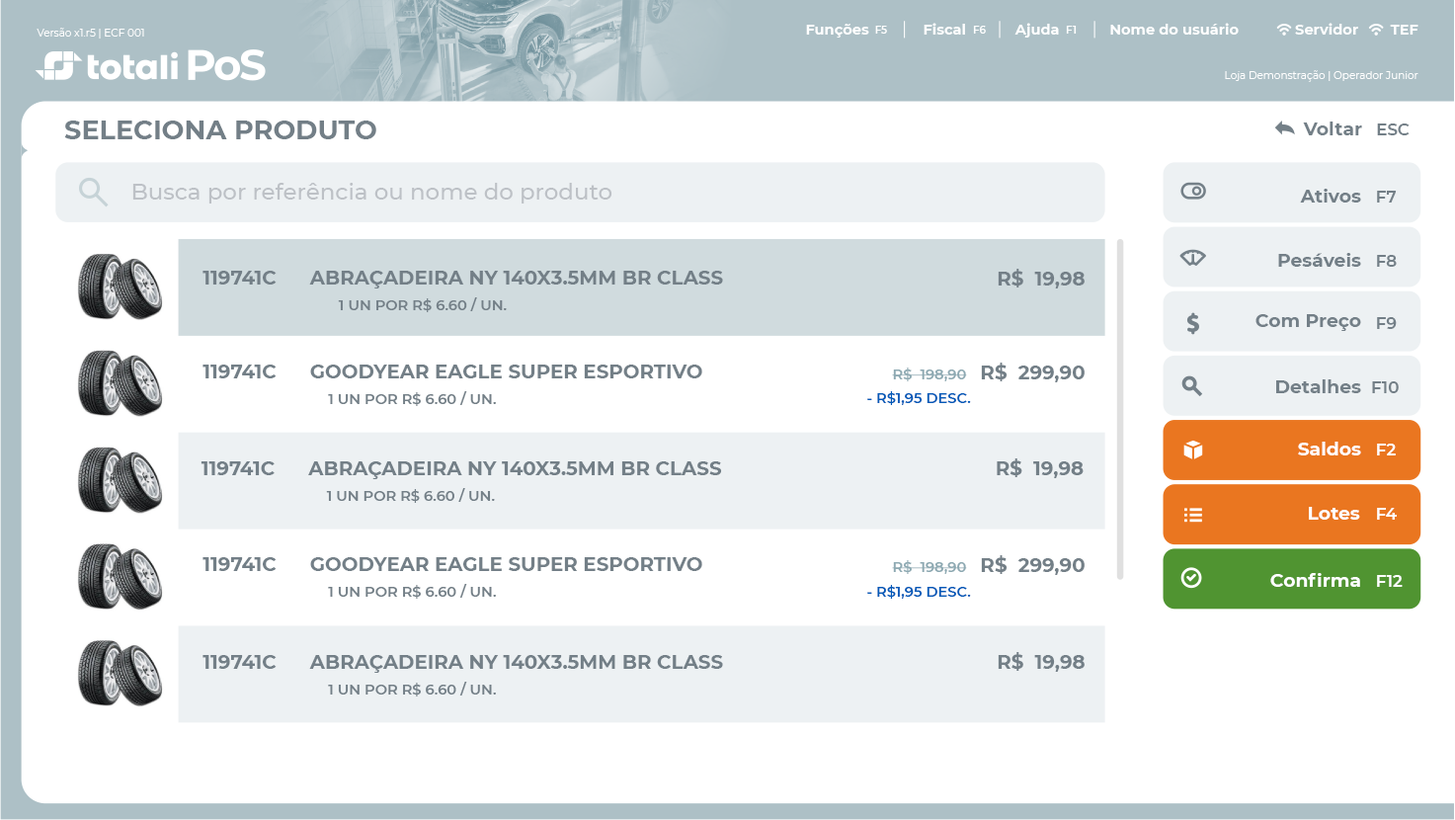
<style>
.page{position:relative;width:1455px;height:820px;background:#ffffff}
.page>*{position:absolute;margin:0}
.t1{font:10.3px "Montserrat-Regular";color:#ffffff}
.t2{font:14.4px "Montserrat-Bold";color:#ffffff}
.t3{font:10.3px "Montserrat-SemiBold";color:#ffffff}
.t4{font:26.7px "Montserrat-Bold";color:#748088}
.t5{font:18.5px "Montserrat-Bold";color:#748088}
.t6{font:16.5px "Montserrat-SemiBold";color:#748088}
.t7{font:22.6px "Montserrat-Medium";color:#bdc2c7}
.t8{font:19.5px "Montserrat-Bold";color:#748088}
.t9{font:14.4px "Montserrat-SemiBold";color:#748088}
.t10{font:14.4px "Montserrat-SemiBold";color:#8ea9b2}
.t11{font:14.4px "Montserrat-SemiBold";color:#005bb9}
.t12{font:18.5px "Montserrat-Bold";color:#ffffff}
.t13{font:16.5px "Montserrat-SemiBold";color:#ffffff}
</style>
<div class="page">
<p class="t1" style="left:37px;top:28px;width:107px;height:11px">Versão x1.r5 | ECF 001</p>
<p class="t2" style="left:806px;top:24px;width:63px;height:14px">Funções</p>
<p class="t3" style="left:875px;top:26px;width:12px;height:8px">F5</p>
<p class="t2" style="left:923px;top:23px;width:42px;height:12px">Fiscal</p>
<p class="t3" style="left:973px;top:26px;width:13px;height:8px">F6</p>
<p class="t2" style="left:1014px;top:23px;width:45px;height:15px">Ajuda</p>
<p class="t3" style="left:1066px;top:26px;width:10px;height:8px">F1</p>
<p class="t2" style="left:1110px;top:23px;width:128px;height:12px">Nome do usuário</p>
<p class="t2" style="left:1295px;top:23px;width:63px;height:12px">Servidor</p>
<p class="t2" style="left:1390px;top:25px;width:28px;height:10px">TEF</p>
<p class="t1" style="left:1225px;top:70px;width:193px;height:12px">Loja Demonstração | Operador Junior</p>
<p class="t4" style="left:64px;top:120px;width:312px;height:19px">SELECIONA PRODUTO</p>
<p class="t5" style="left:1303px;top:121px;width:59px;height:14px">Voltar</p>
<p class="t6" style="left:1377px;top:123px;width:32px;height:12px">ESC</p>
<p class="t7" style="left:132px;top:183px;width:480px;height:20px">Busca por referência ou nome do produto</p>
<p class="t5" style="left:1300px;top:189px;width:61px;height:13px">Ativos</p>
<p class="t6" style="left:1377px;top:191px;width:19px;height:11px">F7</p>
<p class="t5" style="left:1278px;top:253px;width:83px;height:14px">Pesáveis</p>
<p class="t6" style="left:1377px;top:255px;width:19px;height:12px">F8</p>
<p class="t8" style="left:997px;top:269px;width:87px;height:19px">R$  19,98</p>
<p class="t8" style="left:202px;top:271px;width:75px;height:13px">119741C</p>
<p class="t8" style="left:309px;top:271px;width:414px;height:17px">ABRAÇADEIRA NY 140X3.5MM BR CLASS</p>
<p class="t9" style="left:338px;top:297px;width:169px;height:15px">1 UN POR R$ 6.60 / UN.</p>
<p class="t5" style="left:1255px;top:314px;width:106px;height:17px">Com Preço</p>
<p class="t6" style="left:1377px;top:317px;width:19px;height:12px">F9</p>
<p class="t8" style="left:202px;top:364px;width:75px;height:14px">119741C</p>
<p class="t8" style="left:310px;top:364px;width:392px;height:14px">GOODYEAR EAGLE SUPER ESPORTIVO</p>
<p class="t8" style="left:981px;top:362px;width:103px;height:20px">R$  299,90</p>
<p class="t10" style="left:892px;top:367px;width:75px;height:14px">R$  198,90</p>
<p class="t5" style="left:1276px;top:379px;width:85px;height:14px">Detalhes</p>
<p class="t6" style="left:1372px;top:381px;width:26px;height:12px">F10</p>
<p class="t9" style="left:328px;top:391px;width:168px;height:15px">1 UN POR R$ 6.60 / UN.</p>
<p class="t11" style="left:867px;top:391px;width:104px;height:14px">- R$1,95 DESC.</p>
<p class="t12" style="left:1298px;top:441px;width:63px;height:14px">Saldos</p>
<p class="t13" style="left:1377px;top:443px;width:18px;height:12px">F2</p>
<p class="t8" style="left:200px;top:461px;width:75px;height:14px">119741C</p>
<p class="t8" style="left:308px;top:461px;width:414px;height:18px">ABRAÇADEIRA NY 140X3.5MM BR CLASS</p>
<p class="t8" style="left:996px;top:458px;width:87px;height:20px">R$  19,98</p>
<p class="t9" style="left:326px;top:488px;width:169px;height:15px">1 UN POR R$ 6.60 / UN.</p>
<p class="t12" style="left:1309px;top:507px;width:51px;height:12px">Lotes</p>
<p class="t13" style="left:1377px;top:508px;width:19px;height:11px">F4</p>
<p class="t8" style="left:202px;top:557px;width:75px;height:14px">119741C</p>
<p class="t8" style="left:310px;top:557px;width:392px;height:14px">GOODYEAR EAGLE SUPER ESPORTIVO</p>
<p class="t8" style="left:981px;top:555px;width:103px;height:20px">R$  299,90</p>
<p class="t10" style="left:892px;top:560px;width:75px;height:14px">R$  198,90</p>
<p class="t12" style="left:1270px;top:573px;width:90px;height:14px">Confirma</p>
<p class="t13" style="left:1377px;top:575px;width:25px;height:12px">F12</p>
<p class="t9" style="left:328px;top:584px;width:168px;height:14px">1 UN POR R$ 6.60 / UN.</p>
<p class="t11" style="left:867px;top:585px;width:104px;height:13px">- R$1,95 DESC.</p>
<p class="t8" style="left:997px;top:652px;width:87px;height:20px">R$  19,98</p>
<p class="t8" style="left:202px;top:655px;width:75px;height:14px">119741C</p>
<p class="t8" style="left:309px;top:655px;width:414px;height:18px">ABRAÇADEIRA NY 140X3.5MM BR CLASS</p>
<p class="t9" style="left:328px;top:681px;width:168px;height:15px">1 UN POR R$ 6.60 / UN.</p>
</div>
